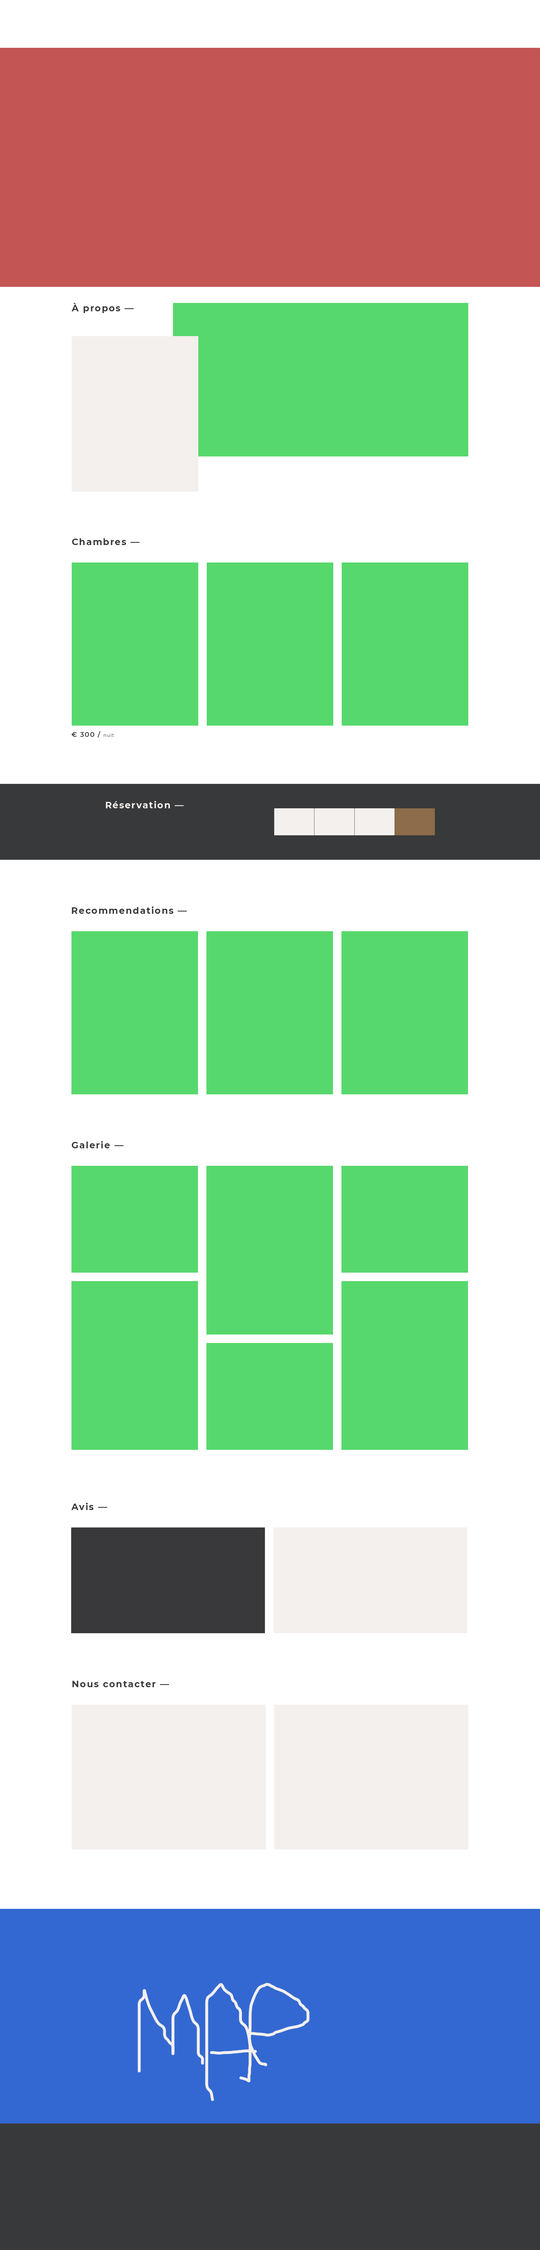
<style>
.page{position:relative;width:540px;height:2250px;background:#ffffff}
.page>*{position:absolute;margin:0}
.t1{font:9px "Montserrat-Bold";letter-spacing:0.1em;color:#38393b}
.t2{font:6.8px "Montserrat-SemiBold";letter-spacing:0.1em;color:#38393b}
.t3{font:4.5px "Montserrat-Regular";letter-spacing:0.1em;color:#38393b}
.t4{font:9px "Montserrat-Bold";letter-spacing:0.1em;color:#f4f0ed}
</style>
<div class="page">
<p class="t1" style="left:71px;top:303px;width:63px;height:10px">À propos —</p>
<p class="t1" style="left:72px;top:538px;width:68px;height:7px">Chambres —</p>
<p class="t2" style="left:71px;top:731px;width:43px;height:6px">€ 300 / <span class="t3">nuit</span></p>
<p class="t4" style="left:106px;top:801px;width:78px;height:7px">Réservation —</p>
<p class="t1" style="left:72px;top:906px;width:115px;height:8px">Recommendations —</p>
<p class="t1" style="left:72px;top:1141px;width:51px;height:7px">Galerie —</p>
<p class="t1" style="left:71px;top:1503px;width:36px;height:7px">Avis —</p>
<p class="t1" style="left:72px;top:1681px;width:97px;height:6px">Nous contacter —</p>
</div>
